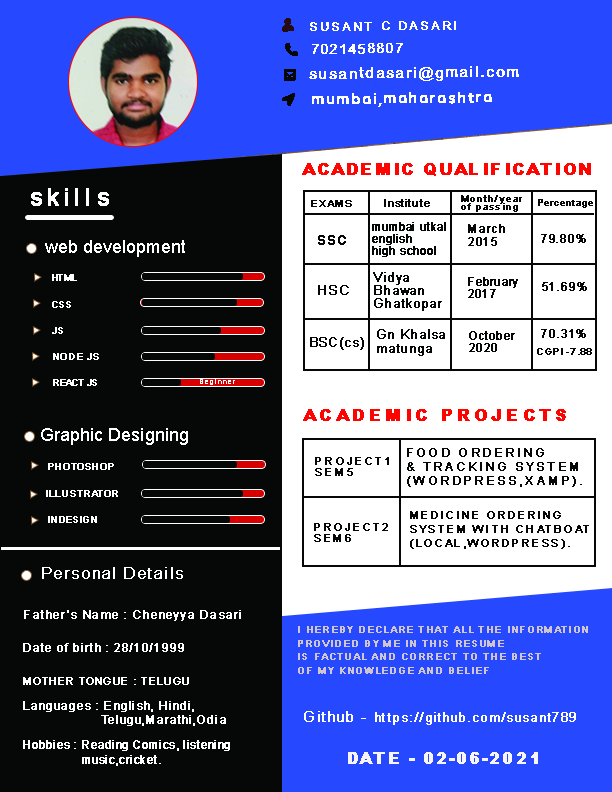
<style>
.page{position:relative;width:612px;height:792px;background:#060808}
.page>*{position:absolute;margin:0}
.t1{font:12.4px "ArialMT";letter-spacing:0.075em;color:#ffffff;text-transform:uppercase;font-weight:bold}
.t2{font:13.7px "ArialMT";letter-spacing:0.075em;color:#ffffff;text-transform:uppercase;font-weight:bold}
.t3{font:14.5px "ArialMT";letter-spacing:0.075em;color:#ffffff;font-weight:bold}
.t4{font:16px "Arial-Black";letter-spacing:0.05em;color:#ff0400;text-transform:uppercase;font-weight:bold;scale:1.06 1}
.t5{font:23px "ArialMT";letter-spacing:0.2em;color:#ffffff;font-weight:bold}
.t6{font:18px "ArialMT";letter-spacing:0.005em;color:#ffffff}
.t7{font:8.7px "ArialMT";letter-spacing:0.005em;color:#ffffff;text-transform:uppercase;font-weight:bold}
.t8{font:9.4px "ArialMT";letter-spacing:0.005em;color:#ffffff;text-transform:uppercase;font-weight:bold}
.t9{font:10.2px "ArialMT";letter-spacing:0.005em;color:#ffffff;text-transform:uppercase;font-weight:bold}
.t10{font:8.6px "ArialMT";letter-spacing:0.005em;color:#ffffff;text-transform:uppercase;font-weight:bold}
.t11{font:7.2px "ArialMT";letter-spacing:0.05em;color:#ffffff;font-weight:bold}
.t12{font:16.5px "Arial-Black";letter-spacing:0.2em;color:#ff0300;text-transform:uppercase;font-weight:bold}
.t13{font:9.6px "ArialMT";letter-spacing:0.005em;color:#ffffff;text-transform:uppercase;font-weight:bold}
.t14{font:9px "ArialMT";letter-spacing:0.005em;color:#ffffff;text-transform:uppercase;font-weight:bold}
.t15{font:16px "ArialMT";letter-spacing:0.05em;color:#ffffff;font-weight:bold}
.t16{font:12.1px "ArialMT";letter-spacing:0.05em;color:#ffffff;font-weight:bold}
.t17{font:8.8px/13.5px "ArialMT";letter-spacing:0.2em;color:#d0c6d0;text-transform:uppercase;font-weight:bold}
.t18{font:11.6px "ArialMT";letter-spacing:0.05em;color:#ffffff;font-weight:bold}
.t19{font:10.7px "ArialMT";letter-spacing:0.05em;color:#ffffff;text-transform:uppercase;font-weight:bold}
.t20{font:11.7px/14px "ArialMT";letter-spacing:0.05em;color:#ffffff;font-weight:bold}
.t21{font:14.9px "ArialMT";letter-spacing:0.05em;color:#ffffff;font-weight:bold}
.t22{font:13.3px "ArialMT";letter-spacing:0.05em;color:#ffffff;font-weight:bold}
.t23{font:11.8px/14.9px "ArialMT";letter-spacing:0.05em;color:#ffffff;font-weight:bold;scale:0.9 1}
.t24{font:16.4px "Arial-Black";letter-spacing:0.05em;color:#f8f5f8;text-transform:uppercase;font-weight:bold}
</style>
<div class="page">
<p class="t1" style="left:310px;top:21px;width:146px;height:10px;rotate:-1deg">Susant c dasari</p>
<p class="t2" style="left:312px;top:43px;width:91px;height:11px;rotate:-1deg">7021458807</p>
<p class="t3" style="left:309px;top:66px;width:210px;height:15px;rotate:-1deg">susantdasari@gmail.com</p>
<p class="t4" style="left:302px;top:163px;width:289px;height:13px">Academic Qualification</p>
<p class="t5" style="left:31px;top:188px;width:78px;height:18px">skills</p>
<p class="t6" style="left:45px;top:240px;width:140px;height:17px">web development</p>
<p class="t7" style="left:52px;top:274px;width:25px;height:7px">html</p>
<p class="t8" style="left:52px;top:301px;width:19px;height:7px">css</p>
<p class="t7" style="left:52px;top:327px;width:11px;height:7px">js</p>
<p class="t9" style="left:53px;top:353px;width:46px;height:7px">node js</p>
<p class="t10" style="left:53px;top:379px;width:44px;height:7px">react js</p>
<p class="t11" style="left:200px;top:379px;width:35px;height:6px">Beginner</p>
<p class="t12" style="left:303px;top:409px;width:263px;height:12px">Academic Projects</p>
<p class="t6" style="left:41px;top:428px;width:147px;height:17px">Graphic Designing</p>
<p class="t13" style="left:48px;top:463px;width:66px;height:7px">PHotoshop</p>
<p class="t13" style="left:46px;top:490px;width:72px;height:7px">illustrator</p>
<p class="t14" style="left:48px;top:516px;width:49px;height:7px">indesign</p>
<p class="t15" style="left:42px;top:567px;width:141px;height:12px">Personal Details</p>
<p class="t16" style="left:24px;top:610px;width:217px;height:11px">Father’s Name : Cheneyya Dasari</p>
<p class="t17" style="left:298px;top:626px;width:290px;height:48px">I hereby declare that all the information<br>provided by me in this resume<br>is factual and correct to the best<br>of my knowledge and belief</p>
<p class="t18" style="left:23px;top:643px;width:161px;height:9px">Date of birth : 28/10/1999</p>
<p class="t19" style="left:23px;top:677px;width:166px;height:8px">mother tongue : Telugu</p>
<p class="t20" style="left:23px;top:701px;width:203px;height:25px">Languages : English, Hindi,<br>    Telugu,Marathi,Odia</p>
<p class="t21" style="left:304px;top:711px;width:62px;height:11px">Github -</p>
<p class="t22" style="left:375px;top:712px;width:201px;height:13px">https://github.com/susant789</p>
<p class="t23" style="left:23px;top:740px;width:207px;height:26px">Hobbies : Reading Comics, listening<br>     music,cricket.</p>
<p class="t24" style="left:348px;top:752px;width:190px;height:12px">dATE - 02-06-2021</p>
</div>
